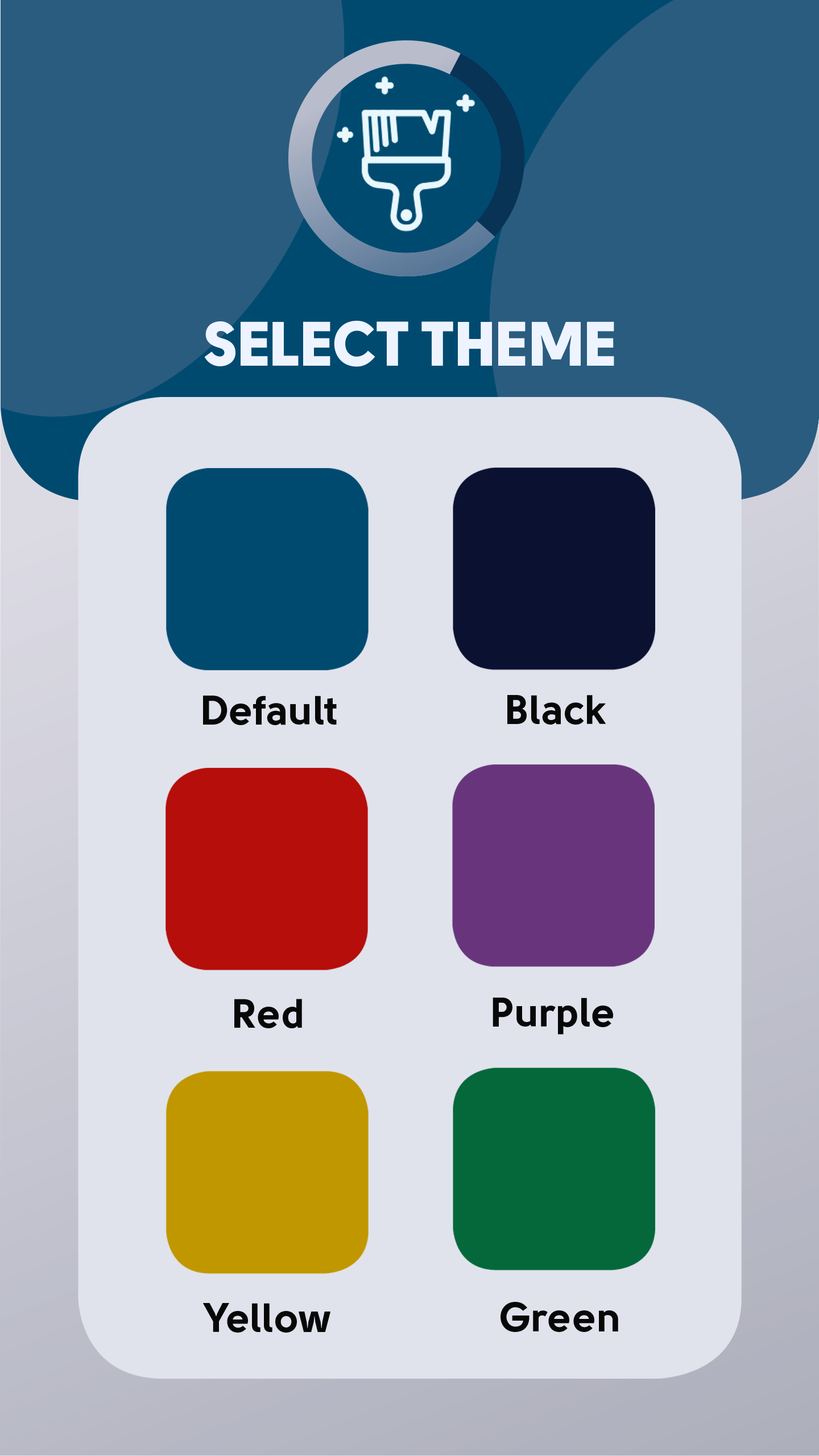
<style>
.page{position:relative;width:819px;height:1456px;background:#e0e3ec}
.page>*{position:absolute;margin:0}
.t1{font:62.6px "Solomon-Sans-Black";color:#eef4ff}
.t2{font:40.9px "Solomon-Sans-Bold";color:#080808}
</style>
<div class="page">
<p class="t1" style="left:204px;top:321px;width:410px;height:46px">SELECT THEME</p>
<p class="t2" style="left:203px;top:696px;width:134px;height:29px">Default</p>
<p class="t2" style="left:507px;top:695px;width:99px;height:30px">Black</p>
<p class="t2" style="left:234px;top:999px;width:68px;height:29px">Red</p>
<p class="t2" style="left:493px;top:998px;width:120px;height:37px">Purple</p>
<p class="t2" style="left:500px;top:1302px;width:118px;height:30px">Green</p>
<p class="t2" style="left:203px;top:1303px;width:127px;height:30px">Yellow</p>
</div>
